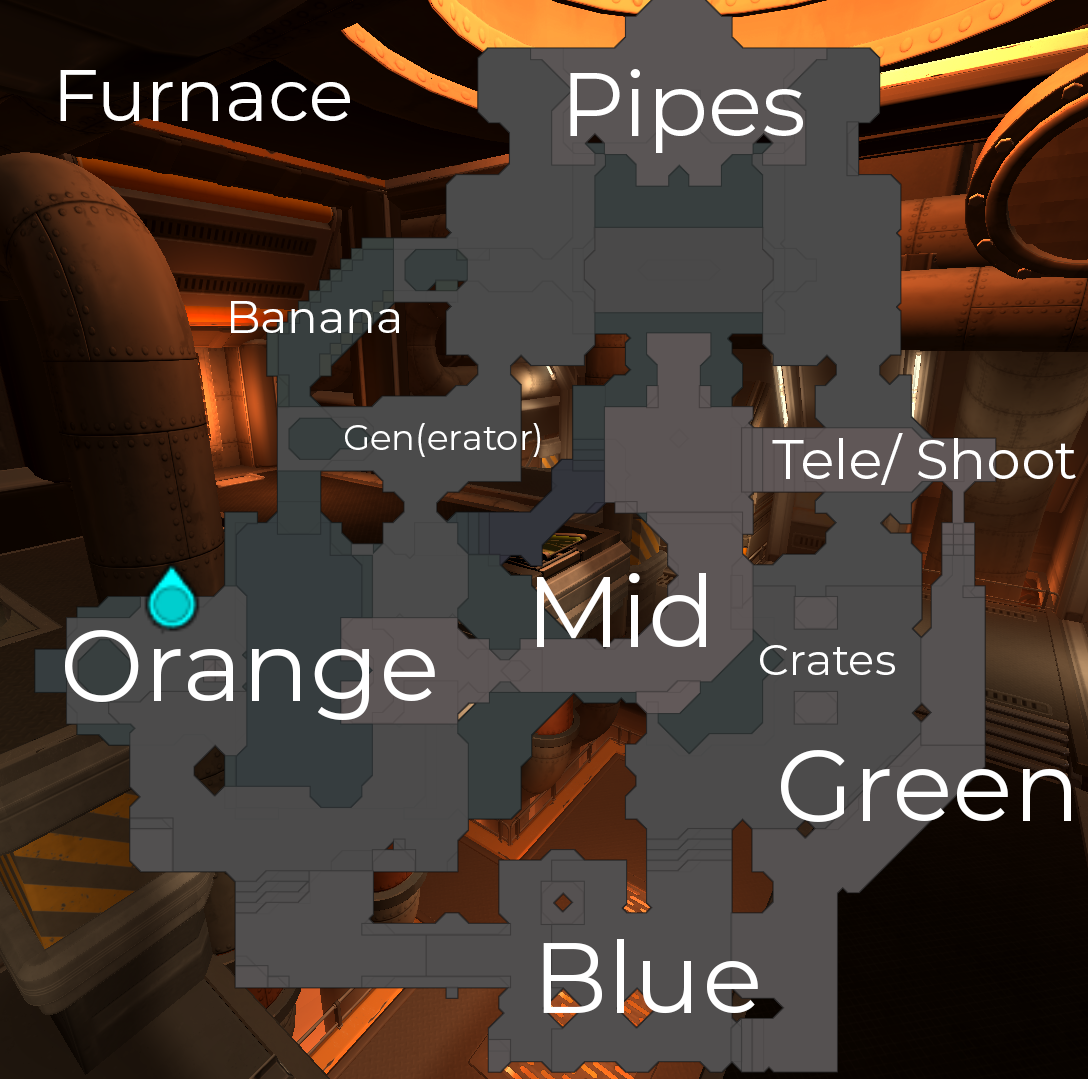
<style>
.page{position:relative;width:1088px;height:1079px}
.page>*{position:absolute;margin:0}
.t1{font:73.3px "Montserrat-Regular";color:#ffffff}
.t2{font:89.7px "Montserrat-Regular";color:#ffffff}
.t3{font:45.7px "Montserrat-Regular";color:#ffffff}
.t4{font:35.3px "Montserrat-Regular";color:#ffffff}
.t5{font:55.1px "Montserrat-Regular";color:#ffffff}
.t6{font:100px "Montserrat-Regular";color:#ffffff}
.t7{font:43.5px "Montserrat-Regular";color:#ffffff}
</style>
<div class="page">
<p class="t1" style="left:60px;top:70px;width:290px;height:51px">Furnace</p>
<p class="t2" style="left:570px;top:69px;width:233px;height:84px">Pipes</p>
<p class="t3" style="left:231px;top:301px;width:168px;height:32px">Banana</p>
<p class="t4" style="left:345px;top:423px;width:195px;height:34px">Gen(erator)</p>
<p class="t5" style="left:772px;top:433px;width:304px;height:52px">Tele/ Shoot</p>
<p class="t6" style="left:537px;top:573px;width:169px;height:74px">Mid</p>
<p class="t6" style="left:65px;top:630px;width:370px;height:90px">Orange</p>
<p class="t7" style="left:760px;top:645px;width:135px;height:30px">Crates</p>
<p class="t6" style="left:781px;top:750px;width:290px;height:72px">Green</p>
<p class="t6" style="left:543px;top:939px;width:215px;height:75px">Blue</p>
</div>
